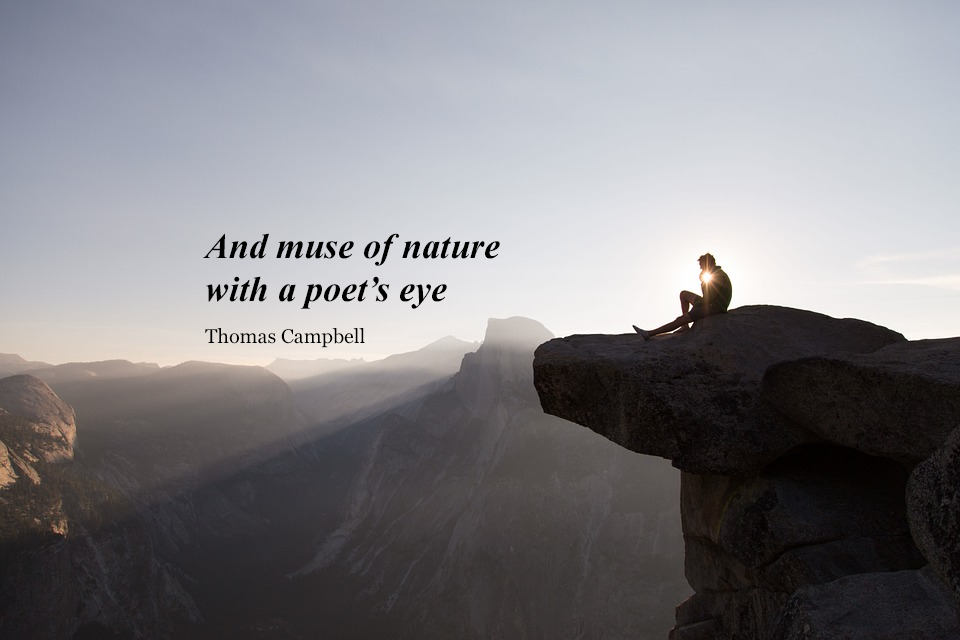
<style>
.page{position:relative;width:960px;height:640px}
.page>*{position:absolute;margin:0}
.t1{font:36px "TimesNewRomanPS-BoldItalicMT";color:#000000}
.t2{font:20px "Georgia";color:#000000}
</style>
<div class="page">
<p class="t1" style="left:203px;top:233px;width:297px;height:115px">And muse of nature <br>with a poet’s eye<br><br><span class="t2">Thomas Campbell</span></p>
</div>
